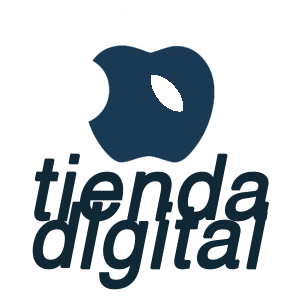
<style>
.page{position:relative;width:302px;height:302px;background:#ffffff}
.page>*{position:absolute;margin:0}
.t1{font:89.7px/48px "NimbusSanL-ReguCond";color:#102735;font-weight:bold;font-style:italic;scale:1.12 1}
</style>
<div class="page">
<p class="t1" style="left:32px;top:153px;width:237px;height:137px">tienda<br>digital</p>
</div>
